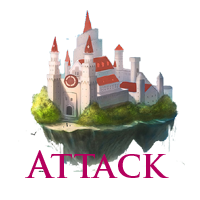
<style>
.page{position:relative;width:200px;height:200px;background:#ffffff}
.page>*{position:absolute;margin:0}
.t1{font:36px "TrajanPro-Bold";color:#b4005d}
</style>
<div class="page">
<p class="t1" style="left:25px;top:150px;width:144px;height:28px">Attack</p>
</div>
